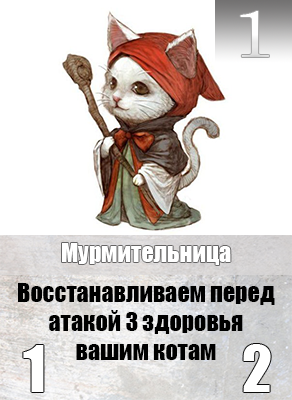
<style>
.page{position:relative;width:292px;height:400px;background:#ffffff}
.page>*{position:absolute;margin:0}
.t1{font:65.6px "Century";color:#ffffff;scale:1.18 1}
.t2{font:24px "Impact";color:#ffffff}
.t3{font:24px "Impact";color:#000000}
</style>
<div class="page">
<p class="t1" style="left:240px;top:11px;width:29px;height:46px">1</p>
<p class="t2" style="left:62px;top:243px;width:169px;height:22px">Мурмительница</p>
<p class="t3" style="left:18px;top:283px;width:257px;height:77px;text-align:center">Восстанавливаем перед атакой 3 здоровья вашим котам</p>
</div>
